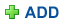
<style>
.page{position:relative;width:65px;height:25px;background:#ffffff}
.page>*{position:absolute;margin:0}
.t1{font:16px "Arial-BoldMT";color:#07519a}
</style>
<div class="page">
<p class="t1" style="left:24px;top:6px;width:35px;height:12px">ADD</p>
</div>
